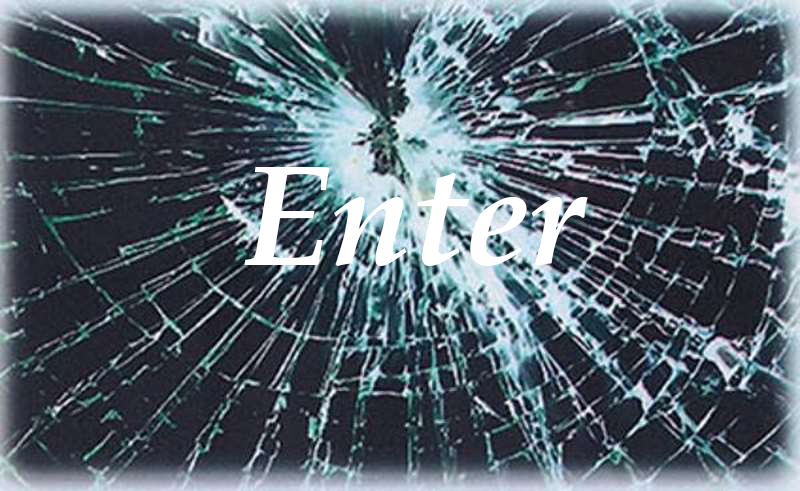
<style>
.page{position:relative;width:800px;height:491px}
.page>*{position:absolute;margin:0}
.t1{font:141.7px "BookAntiqua-BoldItalic";color:#ffffff}
</style>
<div class="page">
<p class="t1" style="left:244px;top:167px;width:344px;height:99px">Enter</p>
</div>
